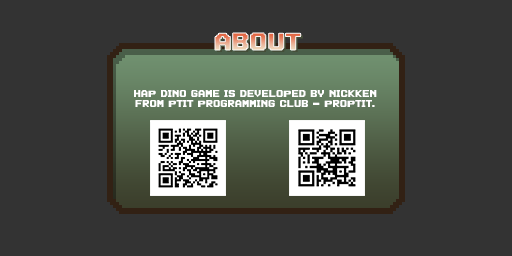
<style>
.page{position:relative;width:512px;height:256px;background:#333333}
.page>*{position:absolute;margin:0}
.t1{font:24px "AutomBold";letter-spacing:0.025em;text-transform:uppercase}
.t2{font:10px/10px "AutomBold";letter-spacing:0.025em;color:#ffffff;text-transform:uppercase}
</style>
<div class="page">
<p class="t1" style="left:215px;top:33px;width:86px;height:17px">ABOUT</p>
<p class="t2" style="left:134px;top:90px;width:243px;height:17px;text-align:center">HAP DINO game is developed by NickKen<br>from PTIT Programming Club - ProPTIT.</p>
</div>
